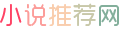
<style>
.page{position:relative;width:120px;height:30px;background:#ffffff}
.page>*{position:absolute;margin:0}
.t1{font:24.5px "RTWSYueRoudGoDemo-Regular";color:#fe4365;text-transform:uppercase}
.t2{font:24.5px "RTWSYueRoudGoDemo-Regular";color:#fc9d9a;text-transform:uppercase}
.t3{font:24.5px "RTWSYueRoudGoDemo-Regular";color:#f9cdad;text-transform:uppercase}
.t4{font:24.5px "RTWSYueRoudGoDemo-Regular";color:#c8c8a9;text-transform:uppercase}
.t5{font:24.5px "RTWSYueRoudGoDemo-Regular";color:#83af9b;text-transform:uppercase}
</style>
<div class="page">
<p class="t1" style="left:0px;top:3px;width:119px;height:24px">小<span class="t2">说</span><span class="t3">推</span><span class="t4">荐</span><span class="t5">网</span></p>
</div>
